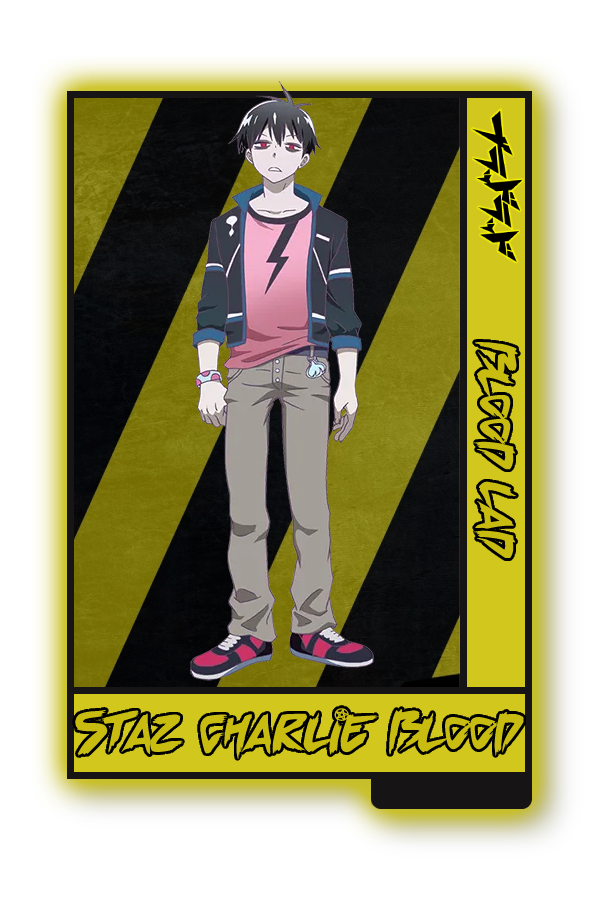
<style>
.page{position:relative;width:600px;height:900px;background:#ffffff}
.page>*{position:absolute;margin:0}
.t1{font:48.8px "ChillingSabrina";color:#c8bc10}
.t2{font:51.6px "ChillingSabrina";color:#c8bc10}
</style>
<div class="page">
<p class="t1" style="left:473px;top:341px;width:45px;height:218px;rotate:90deg">Blood Lad</p>
<p class="t2" style="left:75px;top:708px;width:449px;height:52px">Staz Charlie Blood</p>
</div>
